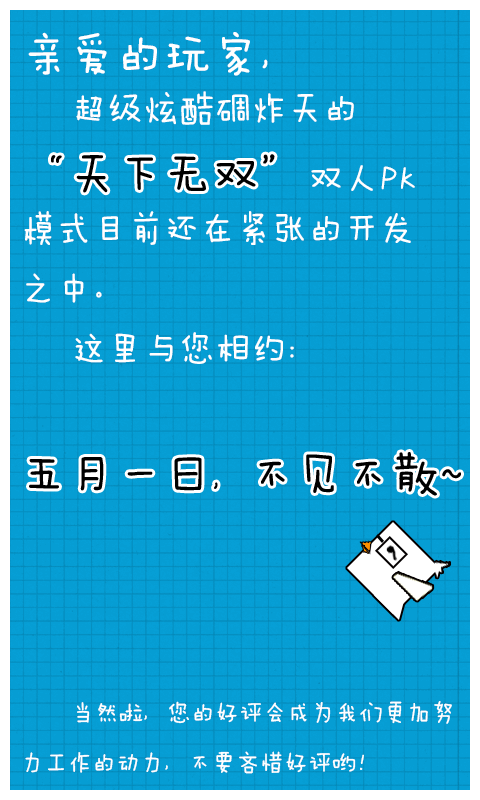
<style>
.page{position:relative;width:480px;height:800px;background:#069dd3}
.page>*{position:absolute;margin:0}
.t1{font:36px/60px "FZMWJW--GB1-0";color:#ffffff}
.t2{font:48px/60px "FZMWJW--GB1-0";color:#ffffff}
.t3{font:24px/60px "FZMWJW--GB1-0";color:#ffffff}
</style>
<div class="page">
<p class="t1" style="left:24px;top:32px;width:437px;height:742px"><span class="t2">亲爱的玩家，<br></span>    超级炫酷碉炸天的<br><span class="t2">“天下无双”</span>双人PK<br>模式目前还在紧张的开发<br>之中。<br>    这里与您相约:<br><span class="t2"><br>五月一日</span>，<span class="t2">不见不散~<br><br><br><br>    </span><span class="t3">当然啦，您的好评会成为我们更加努<br>力工作的动力，不要吝惜好评哟！</span></p>
</div>
